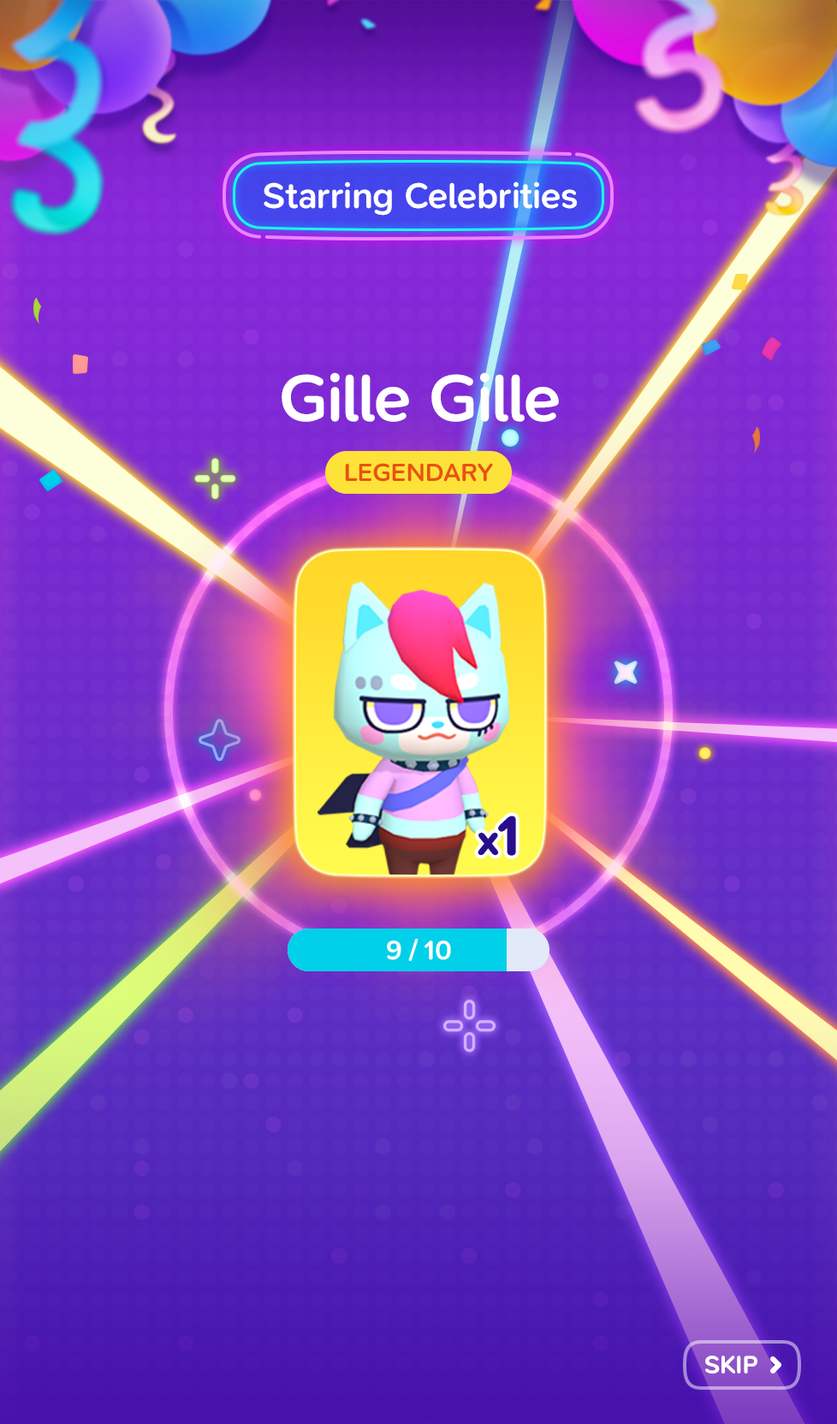
<style>
.page{position:relative;width:837px;height:1424px}
.page>*{position:absolute;margin:0}
.t1{font:36.8px "SNPro-SemiBold";letter-spacing:-0.01em;color:#ffffff}
.t2{font:68.5px "SNPro-SemiBold";letter-spacing:-0.01em;color:#ffffff}
.t3{font:25.7px "SNPro-SemiBold";letter-spacing:-0.01em;color:#e9520f;text-transform:uppercase}
.t4{font:42.2px "SNPro-SemiBold";letter-spacing:-0.01em;color:#280e8c;font-weight:bold}
.t5{font:55.4px "SNPro-SemiBold";letter-spacing:-0.01em;color:#280e8c;font-weight:bold}
.t6{font:27.4px "SNPro-SemiBold";letter-spacing:-0.01em;color:#ffffff}
.t7{font:25.5px "SNPro-SemiBold";letter-spacing:-0.01em;color:#ffffff;text-transform:uppercase}
</style>
<div class="page">
<p class="t1" style="left:264px;top:181px;width:313px;height:35px">Starring Celebrities</p>
<p class="t2" style="left:282px;top:372px;width:277px;height:50px">Gille Gille</p>
<p class="t3" style="left:345px;top:463px;width:148px;height:19px">Legendary</p>
<p class="t4" style="left:478px;top:816px;width:38px;height:40px">x<span class="t5">1</span></p>
<p class="t6" style="left:387px;top:939px;width:64px;height:22px">9 / 10</p>
<p class="t7" style="left:705px;top:1356px;width:53px;height:18px">Skip</p>
</div>
